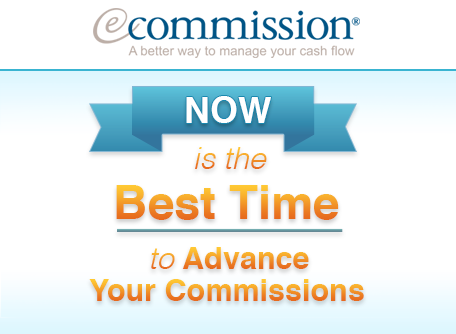
<style>
.page{position:relative;width:456px;height:334px;background:#ffffff}
.page>*{position:absolute;margin:0}
.t1{font:35.7px "Helvetica-Bold";color:#ffffff;text-transform:uppercase}
.t2{font:30.6px "Helvetica-LightOblique"}
.t3{font:47.5px "Helvetica-Bold"}
.t4{font:30.5px "Helvetica-Bold"}
.t5{font:30.5px "Helvetica-LightOblique"}
</style>
<div class="page">
<p class="t1" style="left:186px;top:96px;width:85px;height:27px">Now</p>
<p class="t2" style="left:195px;top:147px;width:72px;height:22px">is the</p>
<p class="t3" style="left:116px;top:185px;width:223px;height:35px">Best Time</p>
<p class="t4" style="left:151px;top:247px;width:158px;height:22px"><span class="t5">to </span>Advance</p>
<p class="t4" style="left:89px;top:279px;width:275px;height:22px">Your Commissions</p>
</div>
